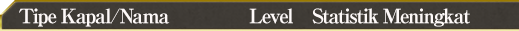
<style>
.page{position:relative;width:519px;height:31px}
.page>*{position:absolute;margin:0}
.t1{font:20px "RyuminPro-ExBold";letter-spacing:-0.08em;color:#fef9f8}
</style>
<div class="page">
<p class="t1" style="left:19px;top:8px;width:451px;height:19px">Tipe Kapal/Nama                Level    Statistik Meningkat</p>
</div>
